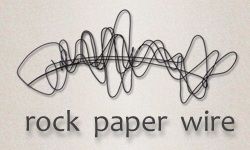
<style>
.page{position:relative;width:250px;height:150px}
.page>*{position:absolute;margin:0}
.t1{font:30px "Candara";color:#424142}
</style>
<div class="page">
<p class="t1" style="left:26px;top:110px;width:209px;height:28px">rock  paper  wire</p>
</div>
